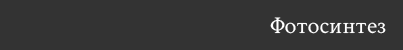
<style>
.page{position:relative;width:403px;height:50px;background:#333333}
.page>*{position:absolute;margin:0}
.t1{font:24px "CrimsonText-Regular";color:#ffffff}
</style>
<div class="page">
<p class="t1" style="left:270px;top:17px;width:116px;height:17px">Фотосинтез</p>
</div>
